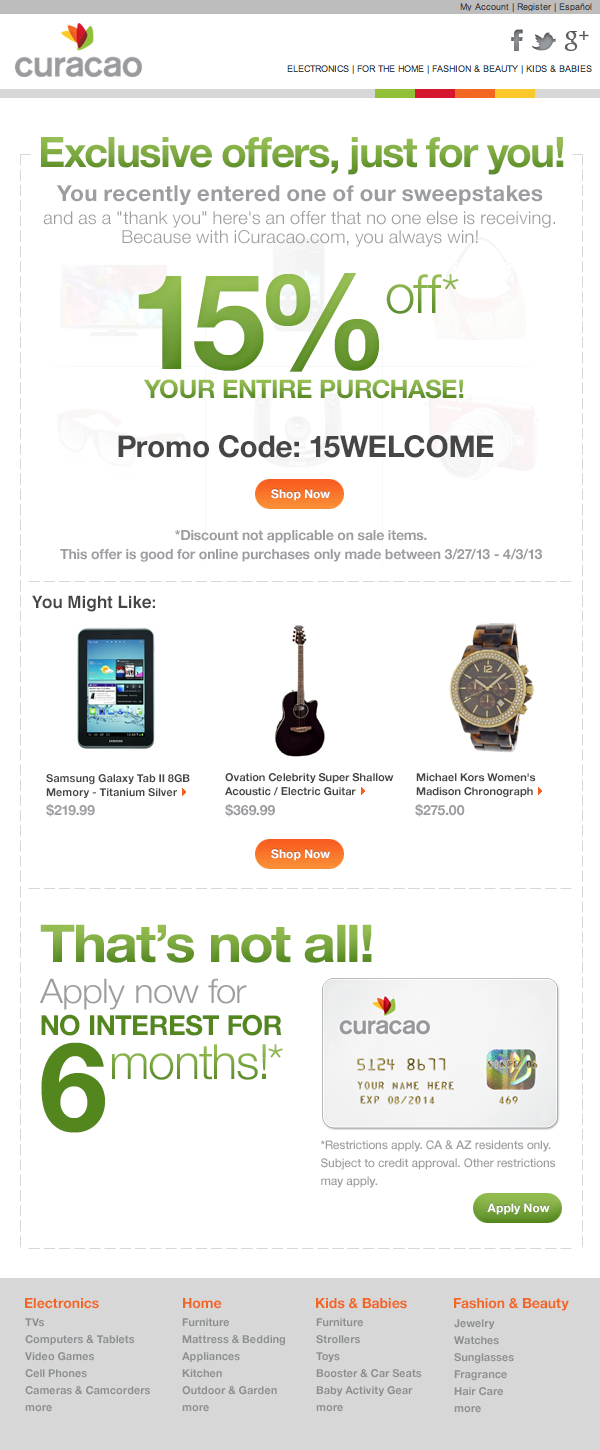
<style>
.page{position:relative;width:600px;height:1450px;background:#ffffff}
.page>*{position:absolute;margin:0}
.t1{font:41.9px "HelveticaNeue-Bold";letter-spacing:-0.04em;color:#7ca840}
.t2{font:18px/22px "HelveticaNeue-Light";color:#9b9da0}
.t3{font:22px/22px "HelveticaNeue-Bold";color:#9b9da0}
.t4{font:18px/19px "HelveticaNeue-Light";color:#9b9da0}
.t5{font:133.1px "HelveticaNeue-Bold";letter-spacing:-0.04em}
.t6{font:54.2px "HelveticaNeue-Light";letter-spacing:-0.01em}
.t7{font:25.6px "HelveticaNeue-Bold";letter-spacing:-0.01em;text-transform:uppercase}
.t8{font:30px "HelveticaNeue-Bold";letter-spacing:-0.01em;color:#454646}
.t9{font:30px "HelveticaNeue-Bold";letter-spacing:-0.01em;color:#454646;text-transform:uppercase}
.t10{font:12px "HelveticaNeue-Bold";color:#ffffff}
.t11{font:14px/18.5px "HelveticaNeue-Bold";letter-spacing:-0.01em;color:#9b9da0}
.t12{font:17px "Helvetica-Bold";color:#454646}
.t13{font:11px/14px "HelveticaNeue-Bold";letter-spacing:-0.01em;color:#454646}
.t14{font:14px "HelveticaNeue-Bold";letter-spacing:-0.01em;color:#9b9da0}
.t15{font:52.4px "HelveticaNeue-Bold";letter-spacing:-0.04em;scale:1.09 1}
.t16{font:34px "HelveticaNeue-Light";letter-spacing:-0.01em;color:#9b9da0;scale:1.07 1}
.t17{font:27.6px "HelveticaNeue-Bold";letter-spacing:-0.01em;color:#53861c}
.t18{font:123.4px "HelveticaNeue-Bold";letter-spacing:-0.04em;color:#53861c}
.t19{font:48.7px "HelveticaNeue-Light";letter-spacing:-0.01em;color:#78a53f}
.t20{font:12px/18px "HelveticaNeue-Medium";letter-spacing:-0.01em;color:#9b9da0}
.t21{font:14px "HelveticaNeue-Bold";letter-spacing:-0.01em;color:#f16622}
.t22{font:11px/17px "HelveticaNeue-Bold";letter-spacing:-0.01em;color:#8c8f91}
</style>
<div class="page">
<p class="t1" style="left:41px;top:137px;width:523px;height:38px">Exclusive offers, just for you!</p>
<p class="t2" style="left:43px;top:185px;width:512px;height:62px;text-align:center"><span class="t3">You recently entered one of our sweepstakes<br></span>and as a "thank you" here's an offer that no one else is receiving.<br><span class="t4">Because with iCuracao.com, you always win!</span></p>
<p class="t5" style="left:138px;top:273px;width:242px;height:99px">15%</p>
<p class="t6" style="left:386px;top:274px;width:73px;height:40px">off*</p>
<p class="t7" style="left:143px;top:379px;width:321px;height:20px">your entire purchase!</p>
<p class="t8" style="left:118px;top:435px;width:376px;height:23px">Promo Code: <span class="t9">15WELCOME</span></p>
<p class="t10" style="left:271px;top:489px;width:59px;height:12px">Shop Now</p>
<p class="t11" style="left:60px;top:530px;width:482px;height:32px;text-align:center">*Discount not applicable on sale items.<br>This offer is good for online purchases only made between 3/27/13 - 4/3/13</p>
<p class="t12" style="left:32px;top:595px;width:123px;height:17px">You Might Like:</p>
<p class="t13" style="left:46px;top:774px;width:144px;height:24px">Samsung Galaxy Tab II 8GB Memory - Titanium Silver</p>
<p class="t13" style="left:225px;top:773px;width:169px;height:23px">Ovation Celebrity Super Shallow Acoustic / Electric Guitar</p>
<p class="t13" style="left:416px;top:773px;width:120px;height:24px">Michael Kors Women's Madison Chronograph</p>
<p class="t14" style="left:46px;top:803px;width:49px;height:14px">$219.99</p>
<p class="t14" style="left:225px;top:803px;width:50px;height:14px">$369.99</p>
<p class="t14" style="left:415px;top:803px;width:50px;height:14px">$275.00</p>
<p class="t10" style="left:271px;top:849px;width:59px;height:12px">Shop Now</p>
<p class="t15" style="left:40px;top:924px;width:332px;height:39px">That’s not all!</p>
<p class="t16" style="left:39px;top:978px;width:208px;height:32px">Apply now for</p>
<p class="t17" style="left:41px;top:1014px;width:241px;height:22px">NO INTEREST FOR</p>
<p class="t18" style="left:41px;top:1042px;width:64px;height:91px">6</p>
<p class="t19" style="left:112px;top:1044px;width:171px;height:36px">months!*</p>
<p class="t20" style="left:320px;top:1140px;width:236px;height:48px">*Restrictions apply. CA &amp; AZ residents only.<br>Subject to credit approval. Other restrictions<br>may apply.</p>
<p class="t10" style="left:487px;top:1203px;width:63px;height:12px">Apply Now</p>
<p class="t21" style="left:25px;top:1298px;width:74px;height:11px">Electronics</p>
<p class="t21" style="left:183px;top:1298px;width:39px;height:11px">Home</p>
<p class="t21" style="left:316px;top:1298px;width:91px;height:11px">Kids &amp; Babies</p>
<p class="t21" style="left:454px;top:1298px;width:115px;height:13px">Fashion &amp; Beauty</p>
<p class="t22" style="left:25px;top:1318px;width:125px;height:94px">TVs<br>Computers &amp; Tablets<br>Video Games<br>Cell Phones<br>Cameras &amp; Camcorders<br>more</p>
<p class="t22" style="left:182px;top:1318px;width:103px;height:94px">Furniture<br>Mattress &amp; Bedding<br>Appliances<br>Kitchen<br>Outdoor &amp; Garden<br>more</p>
<p class="t22" style="left:316px;top:1318px;width:106px;height:94px">Furniture<br>Strollers<br>Toys<br>Booster &amp; Car Seats<br>Baby Activity Gear<br>more</p>
<p class="t22" style="left:454px;top:1319px;width:60px;height:94px">Jewelry<br>Watches<br>Sunglasses<br>Fragrance<br>Hair Care<br>more</p>
</div>
